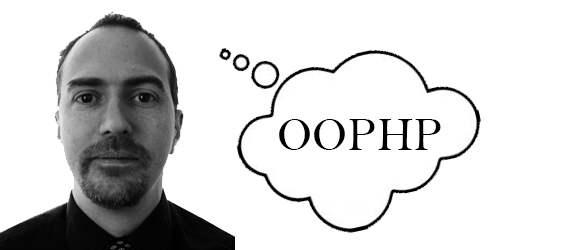
<style>
.page{position:relative;width:567px;height:250px;background:#ffffff}
.page>*{position:absolute;margin:0}
.t1{font:48px "BellMT";color:#000000}
</style>
<div class="page">
<p class="t1" style="left:279px;top:119px;width:162px;height:31px">OOPHP</p>
</div>
